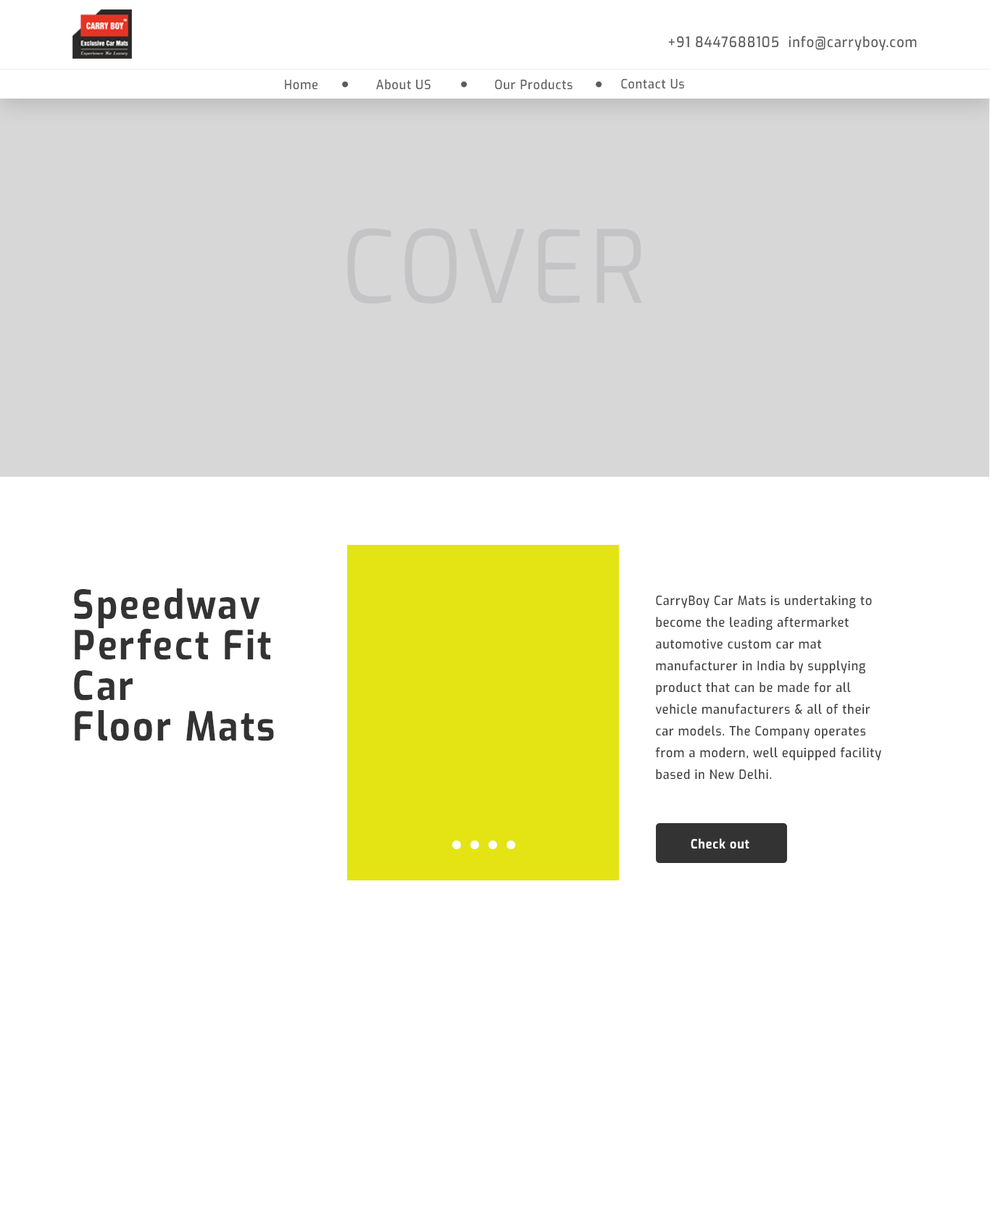
<style>
.page{position:relative;width:990px;height:1205px;background:#ffffff}
.page>*{position:absolute;margin:0}
.t1{font:14.3px "Exo-Medium";letter-spacing:0.06em;color:#5b5b5b;scale:0.91 1}
.t2{font:14.3px "Exo-Medium";letter-spacing:0.06em;color:#5b5b5b;text-transform:uppercase;scale:0.91 1}
.t3{font:12.8px "Exo-Medium";letter-spacing:0.06em;color:#5b5b5b;scale:0.91 1}
.t4{font:100.4px "Exo-Regular";letter-spacing:0.06em;color:#c4c4c6;text-transform:uppercase;scale:0.91 1}
.t5{font:39.8px/40.6px "Exo-Bold";letter-spacing:0.06em;color:#343333;scale:0.91 1}
.t6{font:12.8px/21.7px "Exo-Medium";letter-spacing:0.06em;color:#3b3a3a;scale:0.91 1}
.t7{font:12.8px "Exo-Bold";letter-spacing:0.06em;color:#ffffff;scale:0.91 1}
</style>
<div class="page">
<p class="t1" style="left:668px;top:36px;width:249px;height:15px"><span class="t2">+91 8447688105 </span> info@carryboy.com</p>
<p class="t3" style="left:285px;top:80px;width:33px;height:10px">Home</p>
<p class="t3" style="left:376px;top:79px;width:54px;height:11px">About US</p>
<p class="t3" style="left:495px;top:79px;width:77px;height:11px">Our Products</p>
<p class="t3" style="left:621px;top:78px;width:63px;height:11px">Contact Us</p>
<p class="t4" style="left:347px;top:228px;width:295px;height:76px">Cover</p>
<p class="t5" style="left:74px;top:588px;width:200px;height:153px">Speedwav <br>Perfect Fit <br>Car <br>Floor Mats</p>
<p class="t6" style="left:655px;top:595px;width:226px;height:185px">CarryBoy Car Mats is undertaking to <br>become the leading aftermarket <br>automotive custom car mat <br>manufacturer in India by supplying <br>product that can be made for all <br>vehicle manufacturers &amp; all of their <br>car models. The Company operates <br>from a modern, well equipped facility <br>based in New Delhi.</p>
<p class="t7" style="left:690px;top:838px;width:59px;height:10px">Check out</p>
</div>
